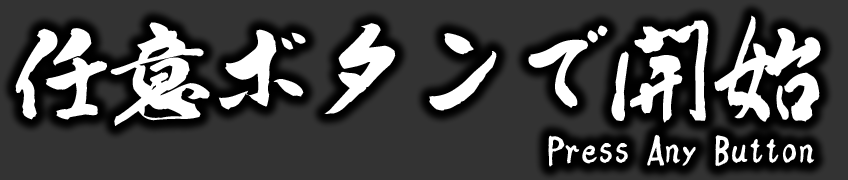
<style>
.page{position:relative;width:848px;height:180px;background:#333333}
.page>*{position:absolute;margin:0}
.t1{font:111.7px "AB_ootori";color:#ffffff;scale:0.57 1}
.t2{font:100px "AB_ootori";color:#ffffff}
.t3{font:33.3px "AB_ootori";color:#ffffff}
</style>
<div class="page">
<p class="t1" style="left:714px;top:15px;width:68px;height:107px">女</p>
<p class="t2" style="left:15px;top:20px;width:694px;height:106px">任意ボタンで開</p>
<p class="t1" style="left:764px;top:28px;width:57px;height:94px">台</p>
<p class="t3" style="left:548px;top:134px;width:267px;height:33px">Press Any Button</p>
</div>
